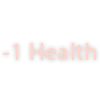
<style>
.page{position:relative;width:100px;height:100px;background:#ffffff}
.page>*{position:absolute;margin:0}
.t1{font:24px "MyriadPro-Regular";letter-spacing:0.02em;color:#ffd5cc}
</style>
<div class="page">
<p class="t1" style="left:3px;top:43px;width:93px;height:17px">-1 Health</p>
</div>
